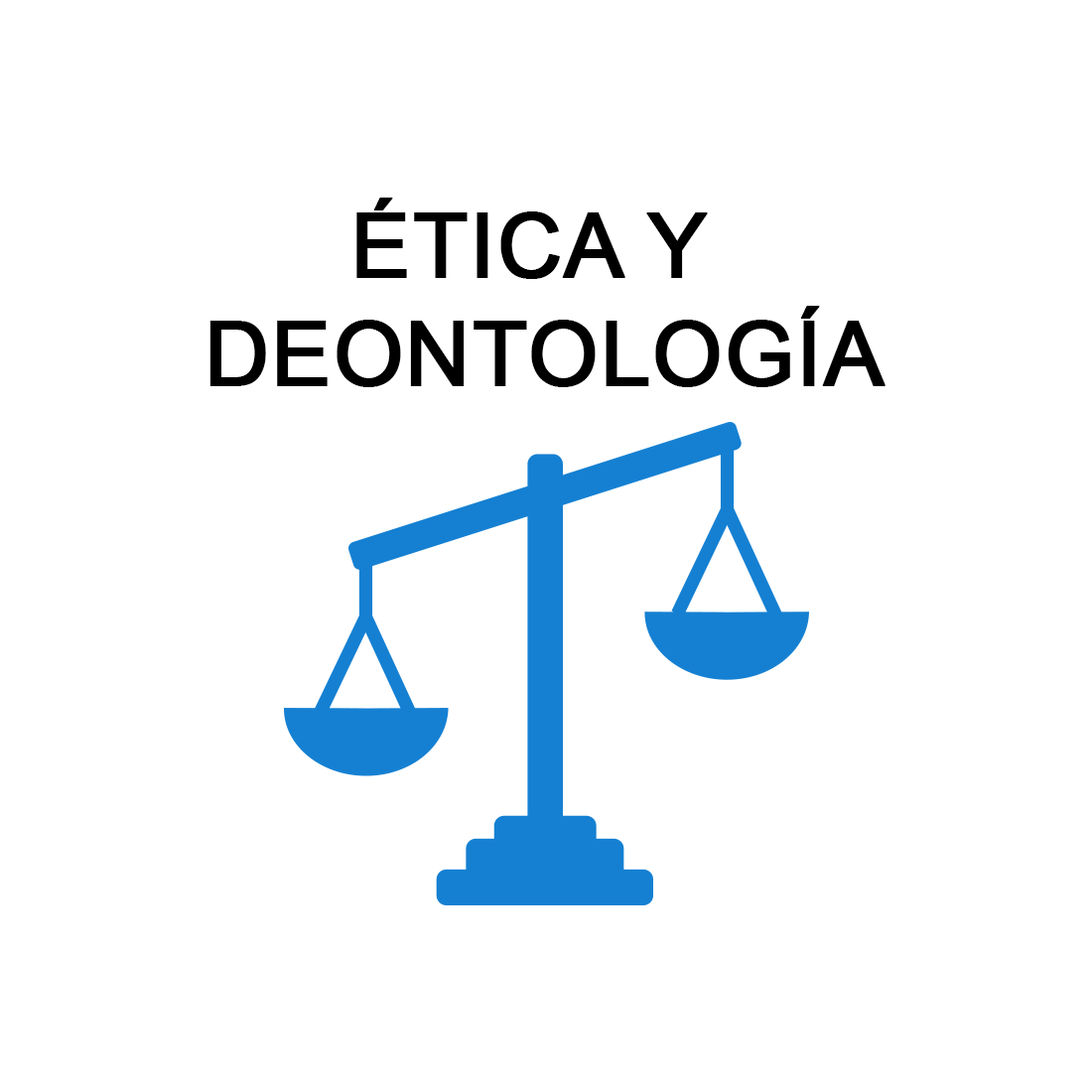
<style>
.page{position:relative;width:1092px;height:1092px;background:#ffffff}
.page>*{position:absolute;margin:0}
.t1{font:89.6px "ArialMT";color:#000000;font-weight:bold}
</style>
<div class="page">
<p class="t1" style="left:209px;top:198px;width:677px;height:189px;text-align:center">ÉTICA Y <br>DEONTOLOGÍA</p>
</div>
